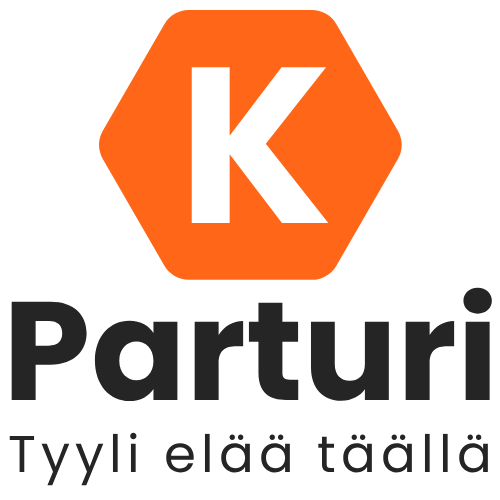
<style>
.page{position:relative;width:500px;height:500px;background:#ffffff}
.page>*{position:absolute;margin:0}
.t1{font:221.7px "Poppins-Bold";color:#ffffff}
.t2{font:140px "Poppins-Bold";color:#252525}
.t3{font:51.5px "Poppins-Regular";letter-spacing:0.1em;color:#252525}
</style>
<div class="page">
<p class="t1" style="left:191px;top:67px;width:138px;height:156px">K</p>
<p class="t2" style="left:11px;top:287px;width:481px;height:114px">Parturi</p>
<p class="t3" style="left:9px;top:432px;width:479px;height:54px">Tyyli elää täällä</p>
</div>
